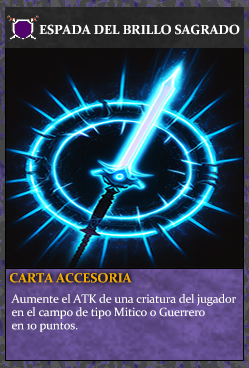
<style>
.page{position:relative;width:249px;height:368px}
.page>*{position:absolute;margin:0}
.t1{font:13.3px "Constantia-Bold";letter-spacing:-0.02em;color:#ffffff}
.t2{font:13.3px "Constantia-Bold";letter-spacing:-0.02em;color:#f2ac05}
.t3{font:12px/13.3px "Constantia";letter-spacing:-0.02em;color:#ffffff}
</style>
<div class="page">
<p class="t1" style="left:39px;top:24px;width:201px;height:11px">ESPADA DEL BRILLO SAGRADO</p>
<p class="t2" style="left:10px;top:273px;width:122px;height:10px">CARTA ACCESORIA</p>
<p class="t3" style="left:11px;top:294px;width:225px;height:38px">Aumente el ATK de una criatura del jugador<br>en el campo de tipo Mitico o Guerrero<br>en 10 puntos.</p>
</div>
